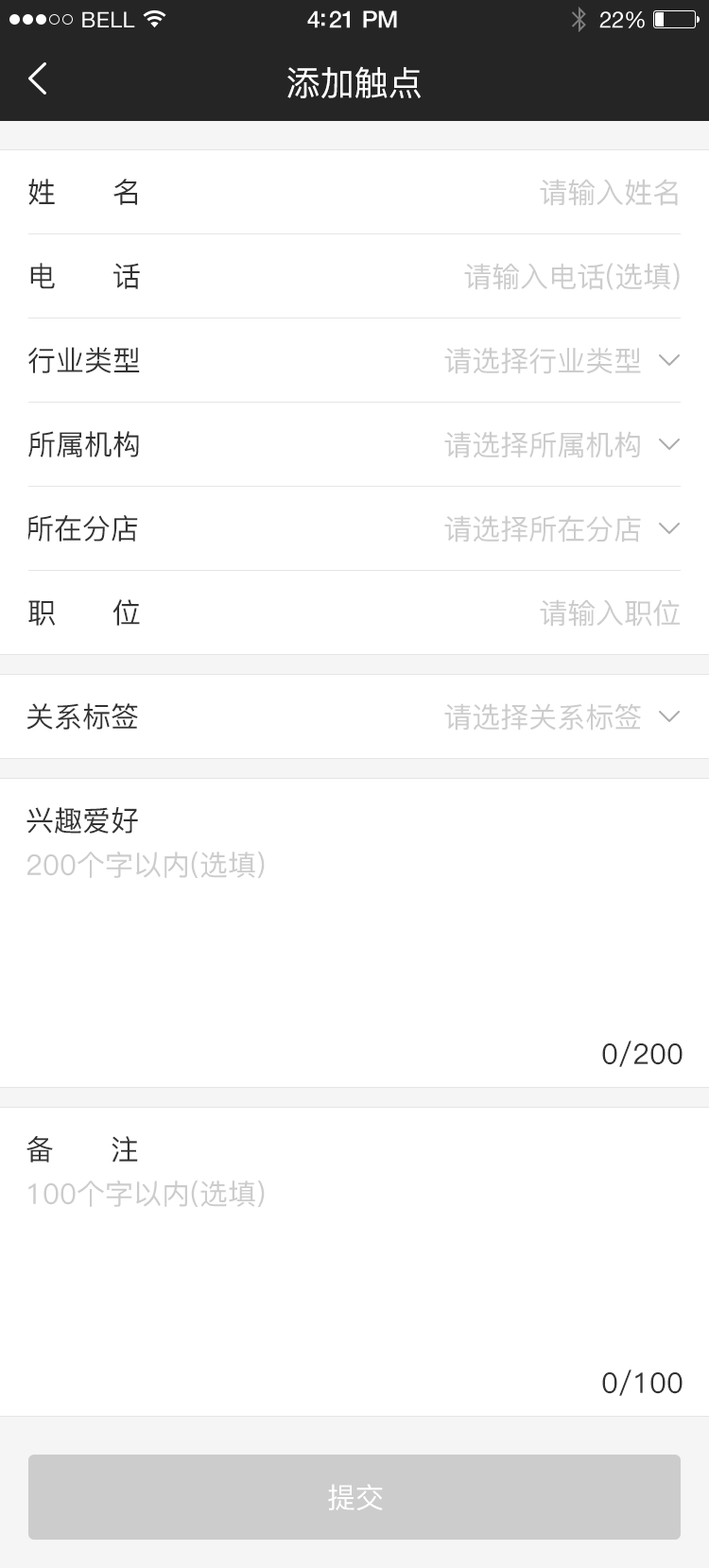
<style>
.page{position:relative;width:709px;height:1568px;background:#ffffff}
.page>*{position:absolute;margin:0}
.t1{font:21.7px "HelveticaNeue";letter-spacing:0.02em;color:#ffffff}
.t2{font:23.6px "HelveticaNeue-Medium";letter-spacing:-0.02em;color:#ffffff}
.t3{font:22.7px "HelveticaNeue";letter-spacing:-0.02em;color:#ffffff}
.t4{font:34px "PingFang-SC-Medium";color:#feffff}
.t5{font:28.4px "PingFang-SC-Medium";color:#333333}
.t6{font:28.4px "PingFang-SC-Medium";color:#cccccc}
.t7{font:28.4px "PingFang-SC-Medium";color:#ffffff}
</style>
<div class="page">
<p class="t1" style="left:82px;top:11px;width:53px;height:16px">BELL</p>
<p class="t2" style="left:307px;top:10px;width:90px;height:18px">4:21 PM</p>
<p class="t3" style="left:599px;top:11px;width:46px;height:17px">22%</p>
<p class="t4" style="left:287px;top:66px;width:134px;height:32px">添加触点</p>
<p class="t5" style="left:28px;top:179px;width:109px;height:26px">姓      名</p>
<p class="t6" style="left:540px;top:179px;width:138px;height:27px">请输入姓名</p>
<p class="t5" style="left:30px;top:263px;width:110px;height:26px">电      话</p>
<p class="t6" style="left:464px;top:263px;width:216px;height:27px">请输入电话(选填)</p>
<p class="t5" style="left:28px;top:347px;width:112px;height:26px">行业类型</p>
<p class="t6" style="left:444px;top:347px;width:197px;height:27px">请选择行业类型</p>
<p class="t5" style="left:28px;top:431px;width:111px;height:26px">所属机构</p>
<p class="t6" style="left:444px;top:431px;width:196px;height:27px">请选择所属机构</p>
<p class="t5" style="left:26px;top:515px;width:112px;height:27px">所在分店</p>
<p class="t6" style="left:444px;top:515px;width:197px;height:28px">请选择所在分店</p>
<p class="t5" style="left:28px;top:599px;width:112px;height:27px">职      位</p>
<p class="t6" style="left:540px;top:599px;width:140px;height:28px">请输入职位</p>
<p class="t5" style="left:26px;top:703px;width:112px;height:27px">关系标签</p>
<p class="t6" style="left:444px;top:703px;width:197px;height:28px">请选择关系标签</p>
<p class="t5" style="left:26px;top:807px;width:112px;height:27px">兴趣爱好</p>
<p class="t6" style="left:26px;top:852px;width:239px;height:26px">200个字以内(选填)</p>
<p class="t5" style="left:602px;top:1041px;width:80px;height:26px">0/200</p>
<p class="t5" style="left:26px;top:1136px;width:112px;height:27px">备      注</p>
<p class="t6" style="left:28px;top:1180px;width:237px;height:27px">100个字以内(选填)</p>
<p class="t5" style="left:602px;top:1370px;width:80px;height:26px">0/100</p>
<p class="t7" style="left:328px;top:1484px;width:55px;height:26px">提交</p>
</div>
